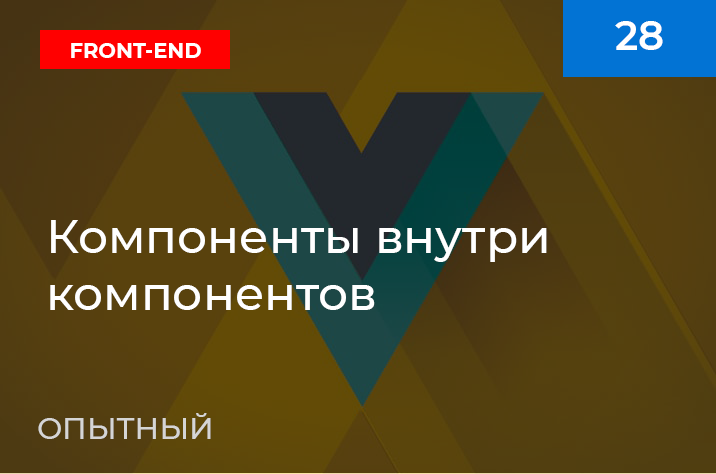
<style>
.page{position:relative;width:716px;height:474px}
.page>*{position:absolute;margin:0}
.t1{font:40px "Montserrat-SemiBold";color:#ffffff}
.t2{font:22px "Montserrat-Bold";color:#ffffff;scale:0.95 1}
.t3{font:47px "Montserrat-Medium";color:#ffffff}
.t4{font:30px "Montserrat-Medium";color:#d5d5d5}
</style>
<div class="page">
<p class="t1" style="left:615px;top:21px;width:48px;height:29px">28</p>
<p class="t2" style="left:71px;top:43px;width:130px;height:15px">FRONT-END</p>
<p class="t3" style="left:50px;top:220px;width:497px;height:90px">Компоненты внутри<br>компонентов</p>
<p class="t4" style="left:38px;top:413px;width:173px;height:26px">ОПЫТНЫЙ</p>
</div>
